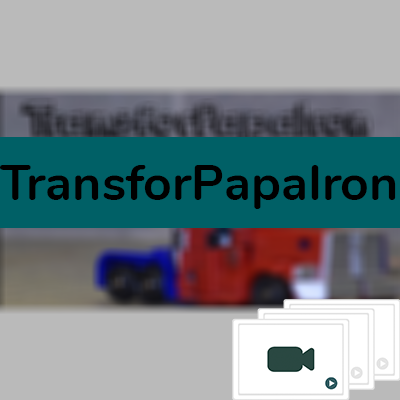
<style>
.page{position:relative;width:400px;height:400px;background:#bababa}
.page>*{position:absolute;margin:0}
.t1{font:50px "Nunito-Bold";color:#000000}
</style>
<div class="page">
<p class="t1" style="left:0px;top:165px;width:396px;height:44px">TransforPapaIron</p>
</div>
